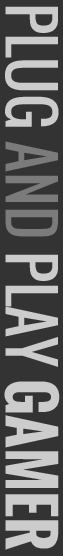
<style>
.page{position:relative;width:63px;height:556px;background:#333333}
.page>*{position:absolute;margin:0}
.t1{font:60px "Oswald-Bold";color:#cccccc}
.t2{font:60px "Oswald-Regular";color:#cccccc}
</style>
<div class="page">
<p class="t1" style="left:4px;top:6px;width:56px;height:544px;rotate:90deg"><span class="t2">PLUG </span><span class="t2">AND </span><span class="t2">PLAY </span>GAMER</p>
</div>
